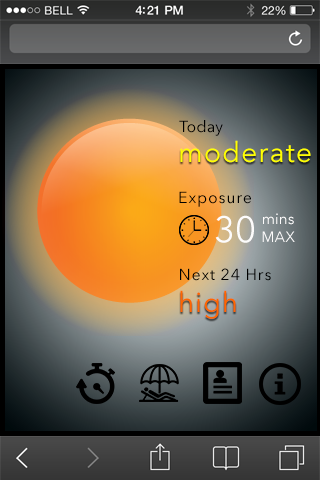
<style>
.page{position:relative;width:320px;height:480px}
.page>*{position:absolute;margin:0}
.t1{font:16px "AvenirNextLTW01-Regular";letter-spacing:0.005em;color:#000000}
.t2{font:28px "AvenirNextLTW01-Regular";letter-spacing:0.05em;color:#ffff01}
.t3{font:16px "AvenirNextLTW01-Regular";letter-spacing:0.05em;color:#000000}
.t4{font:36px "AvenirNextLTW01-Regular";letter-spacing:0.005em;color:#fdfcfc}
.t5{font:15px "AvenirNextLTW01-Regular";letter-spacing:0.005em;color:#fdfcfc}
.t6{font:28px "AvenirNextLTW01-Regular";letter-spacing:0.05em;color:#ff6600}
</style>
<div class="page">
<p class="t1" style="left:179px;top:120px;width:44px;height:16px">Today</p>
<p class="t2" style="left:180px;top:140px;width:131px;height:23px">moderate</p>
<p class="t3" style="left:179px;top:191px;width:72px;height:16px">Exposure</p>
<p class="t4" style="left:215px;top:215px;width:39px;height:28px">30</p>
<p class="t5" style="left:262px;top:213px;width:33px;height:29px;text-align:center">mins<br>MAX</p>
<p class="t3" style="left:180px;top:268px;width:91px;height:13px">Next 24 Hrs</p>
<p class="t6" style="left:180px;top:290px;width:56px;height:29px">high</p>
</div>
